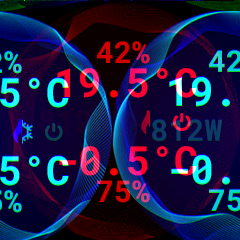
<style>
.page{position:relative;width:240px;height:240px}
.page>*{position:absolute;margin:0}
.t1{font:30px "RobotoMono-Bold"}
.t2{font:40px "RobotoMono-Bold"}
</style>
<div class="page">
<p class="t1" style="left:96px;top:39px;width:54px;height:23px">42%</p>
<p class="t2" style="left:57px;top:66px;width:140px;height:30px">19.5°C</p>
<p class="t1" style="left:40px;top:108px;width:71px;height:23px">812W</p>
<p class="t2" style="left:59px;top:144px;width:138px;height:30px">-0.5°C</p>
<p class="t1" style="left:97px;top:178px;width:53px;height:23px">75%</p>
</div>
